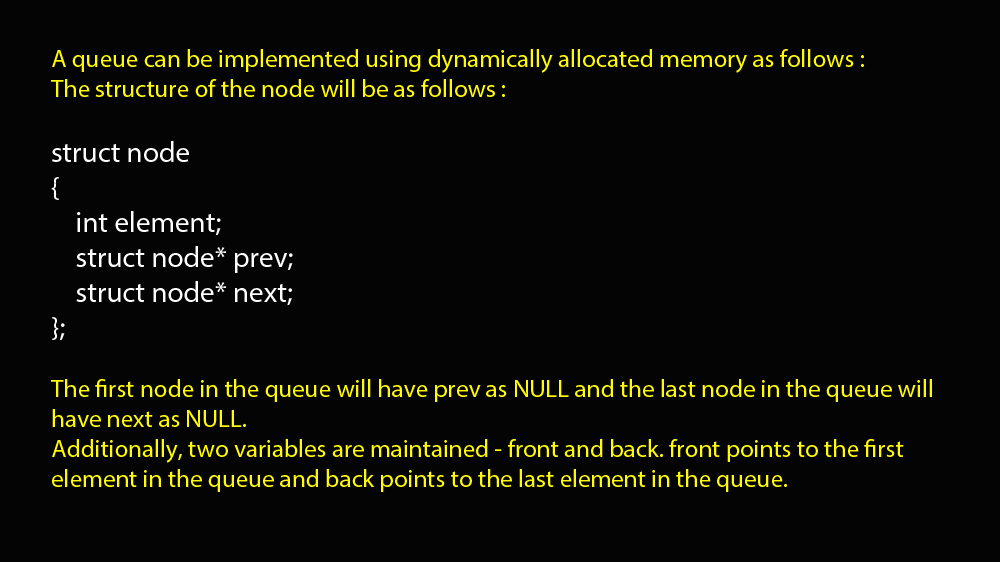
<style>
.page{position:relative;width:1000px;height:562px;background:#050404}
.page>*{position:absolute;margin:0}
.t1{font:25px "MyriadPro-Regular";color:#fefb04}
.t2{font:29.2px "MyriadPro-Regular";color:#ffffff}
</style>
<div class="page">
<p class="t1" style="left:51px;top:49px;width:881px;height:443px">A queue can be implemented using dynamically allocated memory as follows :<br>The structure of the node will be as follows :<br><br><span class="t2">struct node<br>{<br>    int element;<br>    struct node* prev;<br>    struct node* next;<br>};<br><br></span>The first node in the queue will have prev as NULL and the last node in the queue will have next as NULL.<br>Additionally, two variables are maintained - front and back. front points to the first element in the queue and back points to the last element in the queue.</p>
</div>
